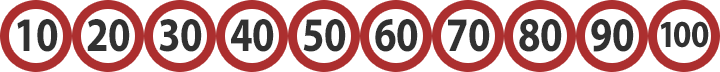
<style>
.page{position:relative;width:720px;height:72px;background:#ffffff}
.page>*{position:absolute;margin:0}
.t1{font:48.6px "MyriadPro-Bold";color:#313131;scale:0.83 1}
</style>
<div class="page">
<p class="t1" style="left:17px;top:19px;width:41px;height:33px">10</p>
<p class="t1" style="left:87px;top:19px;width:43px;height:33px">20</p>
<p class="t1" style="left:159px;top:19px;width:43px;height:33px">30</p>
<p class="t1" style="left:231px;top:19px;width:43px;height:33px">40</p>
<p class="t1" style="left:303px;top:19px;width:43px;height:33px">50</p>
<p class="t1" style="left:375px;top:19px;width:43px;height:33px">60</p>
<p class="t1" style="left:448px;top:19px;width:42px;height:33px">70</p>
<p class="t1" style="left:519px;top:19px;width:43px;height:33px">80</p>
<p class="t1" style="left:591px;top:19px;width:43px;height:33px">90</p>
</div>
